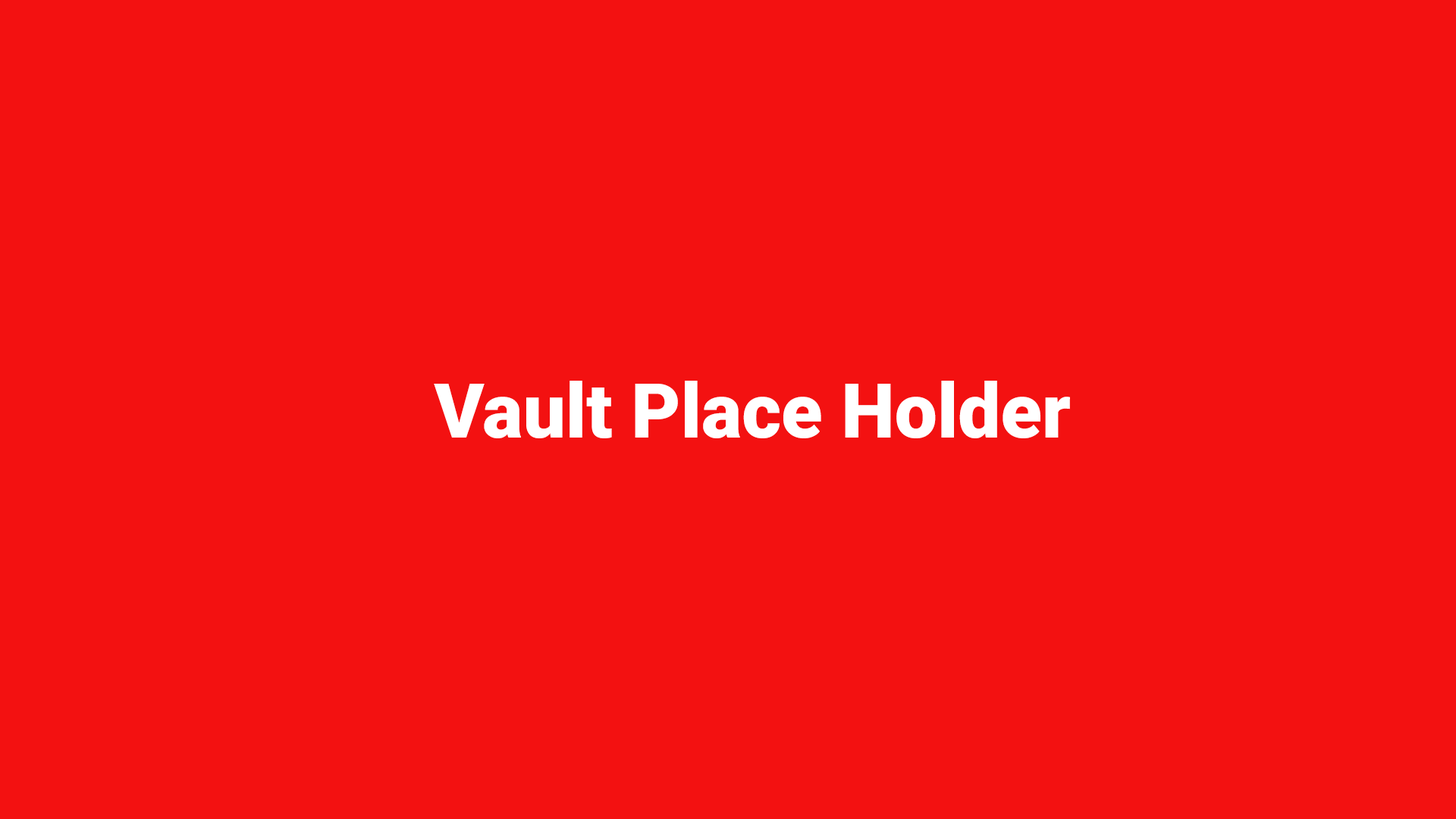
<style>
.page{position:relative;width:1456px;height:819px;background:#f31111}
.page>*{position:absolute;margin:0}
.t1{font:75.8px "Roboto-Black";color:#ffffff}
</style>
<div class="page">
<p class="t1" style="left:434px;top:381px;width:636px;height:57px">Vault Place Holder</p>
</div>
